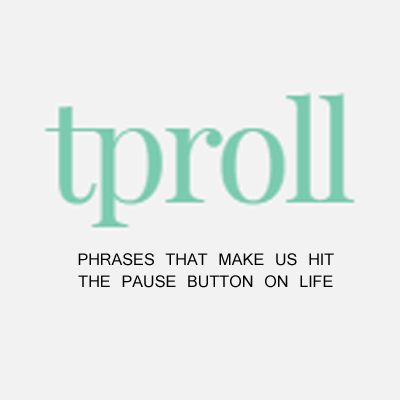
<style>
.page{position:relative;width:400px;height:400px;background:#f2f2f2}
.page>*{position:absolute;margin:0}
.t1{font:18px "Vrinda";color:#010101}
</style>
<div class="page">
<p class="t1" style="left:78px;top:253px;width:256px;height:35px;text-align:center">PHRASES THAT MAKE US HIT<br>THE PAUSE BUTTON ON LIFE</p>
</div>
